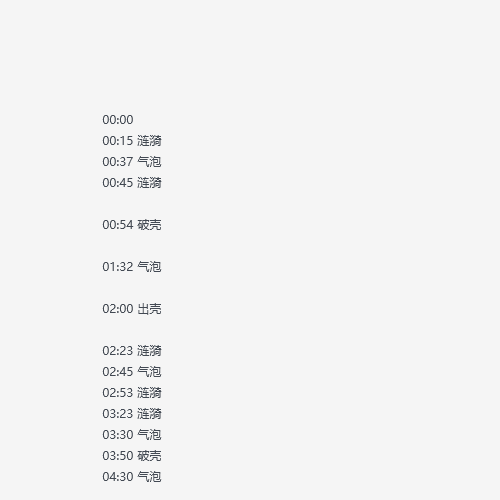
<style>
.page{position:relative;width:500px;height:500px;background:#f5f5f5}
.page>*{position:absolute;margin:0}
.t1{font:12px "MicrosoftYaHei";color:#424953}
</style>
<div class="page">
<p class="t1" style="left:102px;top:115px;width:60px;height:367px">00:00<br>00:15 涟漪<br>00:37 气泡<br>00:45 涟漪<br><br>00:54 破壳<br><br>01:32 气泡<br><br>02:00 出壳<br><br>02:23 涟漪<br>02:45 气泡<br>02:53 涟漪<br>03:23 涟漪<br>03:30 气泡<br>03:50 破壳<br>04:30 气泡</p>
</div>
